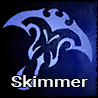
<style>
.page{position:relative;width:98px;height:98px}
.page>*{position:absolute;margin:0}
.t1{font:16px "Roboto-Medium";color:#ffffff;scale:1.2 1}
</style>
<div class="page">
<p class="t1" style="left:11px;top:75px;width:77px;height:12px">Skimmer</p>
</div>
